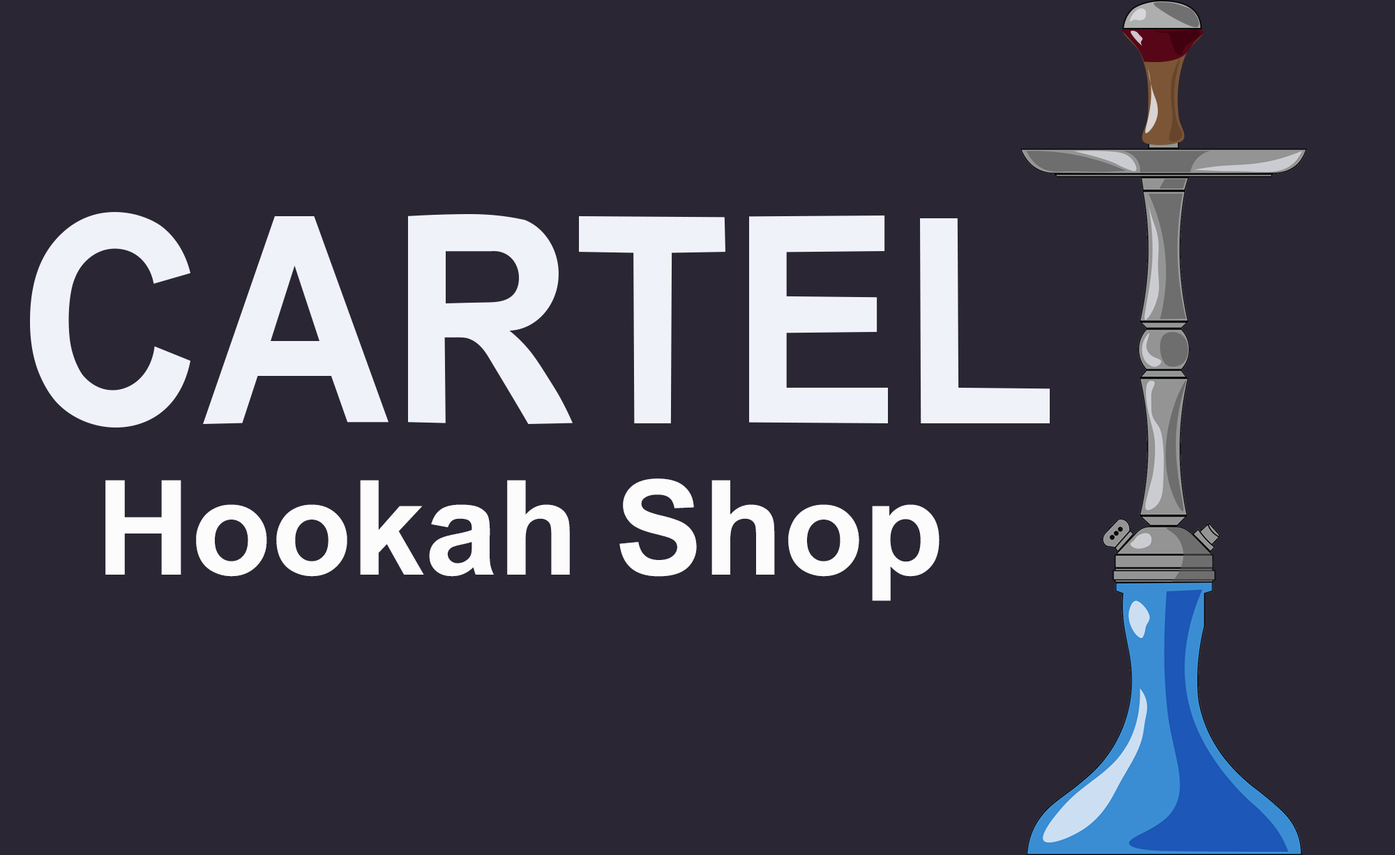
<style>
.page{position:relative;width:1395px;height:855px;background:#2a2634}
.page>*{position:absolute;margin:0}
.t1{font:131.6px "Arial-BoldMT";color:#fcfcfc}
</style>
<div class="page">
<p class="t1" style="left:105px;top:478px;width:834px;height:123px">Hookah Shop</p>
</div>
